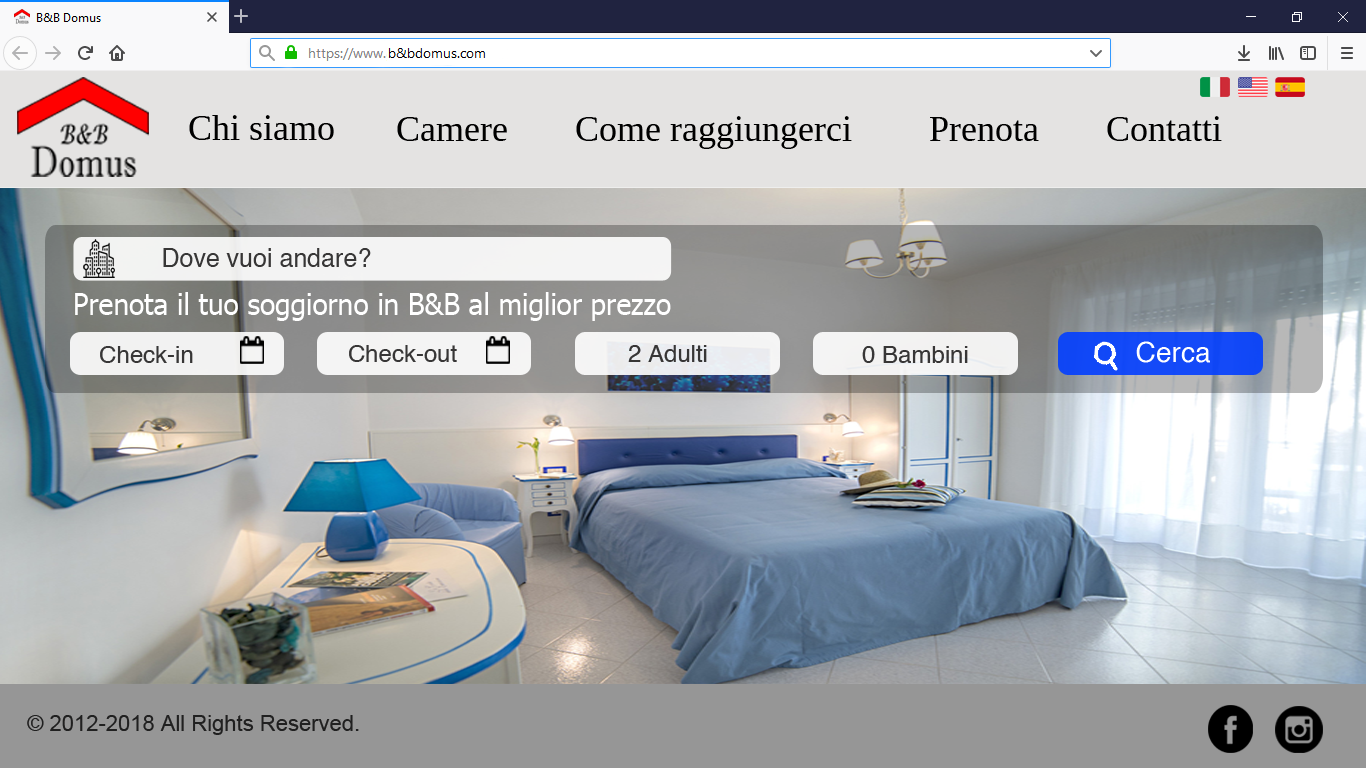
<style>
.page{position:relative;width:1366px;height:768px}
.page>*{position:absolute;margin:0}
.t1{font:36px "Tinos-Regular";color:#000000}
.t2{font:25px "Helvetica";color:#373636}
.t3{font:30.4px "Tahoma";color:#ffffff;scale:0.92 1}
.t4{font:28.3px "Tahoma";color:#000000;scale:0.92 1}
.t5{font:28px "Helvetica";color:#ffffff}
.t6{font:24px "Helvetica";color:#373636}
.t7{font:22px "ArialMT";color:#373636}
</style>
<div class="page">
<p class="t1" style="left:189px;top:115px;width:145px;height:25px">Chi siamo</p>
<p class="t1" style="left:397px;top:117px;width:110px;height:24px">Camere</p>
<p class="t1" style="left:576px;top:116px;width:276px;height:33px">Come raggiungerci</p>
<p class="t1" style="left:930px;top:117px;width:109px;height:24px">Prenota</p>
<p class="t1" style="left:1107px;top:116px;width:115px;height:25px">Contatti</p>
<p class="t2" style="left:163px;top:248px;width:208px;height:19px">Dove vuoi andare?</p>
<p class="t3" style="left:75px;top:292px;width:596px;height:29px">Prenota il tuo soggiorno in B&amp;B al miglior prezzo <span class="t4">garantito</span></p>
<p class="t5" style="left:1136px;top:341px;width:74px;height:22px">Cerca</p>
<p class="t6" style="left:100px;top:346px;width:93px;height:17px">Check-in</p>
<p class="t6" style="left:349px;top:345px;width:108px;height:17px">Check-out</p>
<p class="t6" style="left:628px;top:345px;width:79px;height:17px">2 Adulti</p>
<p class="t6" style="left:862px;top:346px;width:106px;height:17px">0 Bambini</p>
<p class="t7" style="left:27px;top:715px;width:332px;height:20px">© 2012-2018 All Rights Reserved.</p>
</div>
